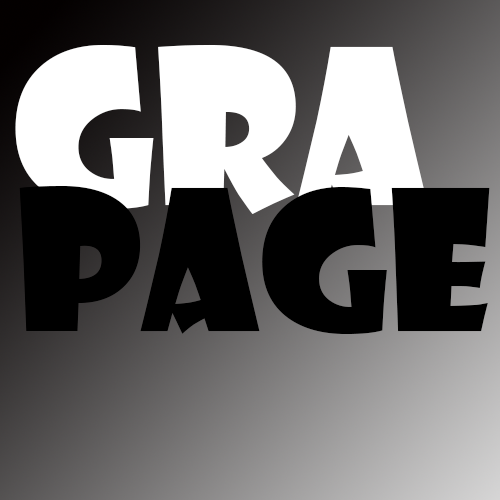
<style>
.page{position:relative;width:500px;height:500px}
.page>*{position:absolute;margin:0}
.t1{font:210px "ShowcardGothic-Reg";color:#ffffff}
.t2{font:190px "ShowcardGothic-Reg";color:#000000}
</style>
<div class="page">
<p class="t1" style="left:15px;top:44px;width:413px;height:170px">GRA</p>
<p class="t2" style="left:19px;top:185px;width:471px;height:149px">pAGE</p>
</div>
